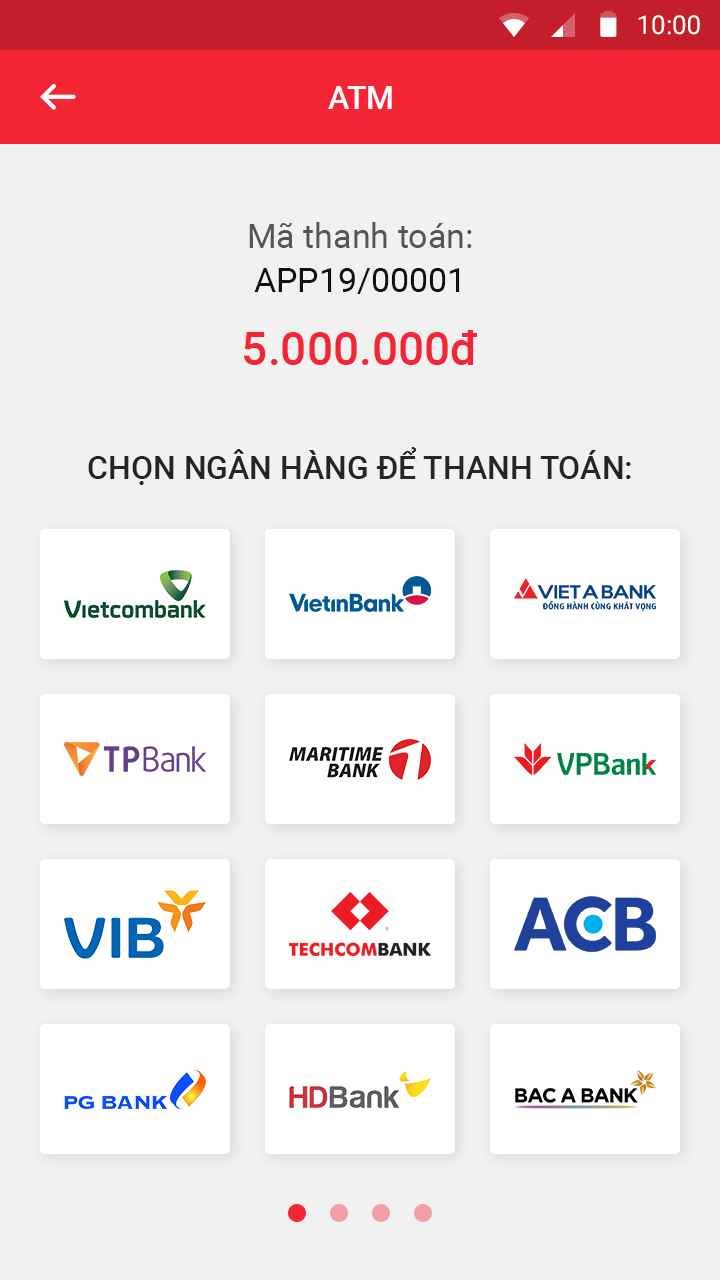
<style>
.page{position:relative;width:720px;height:1280px;background:#f1f1f1}
.page>*{position:absolute;margin:0}
.t1{font:26px "Roboto-Regular";color:#ffffff}
.t2{font:32px "Roboto-Medium";color:#ffffff}
.t3{font:34px/44px "Roboto-Regular";color:#555555}
.t4{font:34px/44px "Roboto-Regular";color:#111111}
.t5{font:46px "Roboto-Medium";color:#f42535}
.t6{font:32px "Roboto-Medium";color:#252525;text-transform:uppercase}
</style>
<div class="page">
<p class="t1" style="left:638px;top:15px;width:62px;height:20px">10:00</p>
<p class="t2" style="left:328px;top:86px;width:64px;height:23px">ATM</p>
<p class="t3" style="left:249px;top:222px;width:223px;height:72px;text-align:center">Mã thanh toán:<br><span class="t4">APP19/00001</span></p>
<p class="t5" style="left:243px;top:330px;width:234px;height:35px">5.000.000đ</p>
<p class="t6" style="left:88px;top:447px;width:543px;height:38px">Chọn ngân hàng để thanh toán:</p>
</div>
